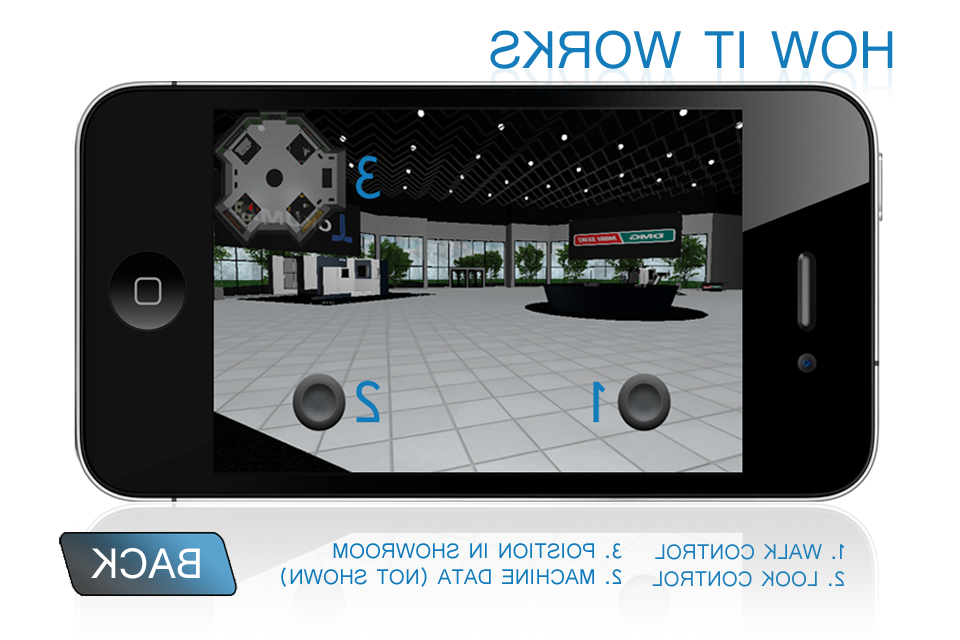
<style>
.page{position:relative;width:960px;height:640px;background:#ffffff}
.page>*{position:absolute;margin:0}
.t1{font:55.7px "Shruti";color:#147cbb}
.t2{font:22.3px "Shruti";color:#0f7abb}
.t3{font:22.3px "Shruti";color:#1c7fbb}
.t4{font:44.5px "Shruti";color:#ffffff}
</style>
<div class="page">
<p class="t1" style="left:490px;top:30px;width:403px;height:39px;rotate:180deg">HOW IT WORKS</p>
<p class="t2" style="left:281px;top:543px;width:341px;height:44px;rotate:180deg">3. POISTION IN SHOWROOM<br>2. MACHINE DATA (NOT SHOWN)</p>
<p class="t3" style="left:652px;top:544px;width:193px;height:43px;rotate:180deg">1. WALK CONTROL<br>2. LOOK CONTROL</p>
<p class="t4" style="left:91px;top:548px;width:109px;height:31px;rotate:180deg">BACK</p>
</div>
